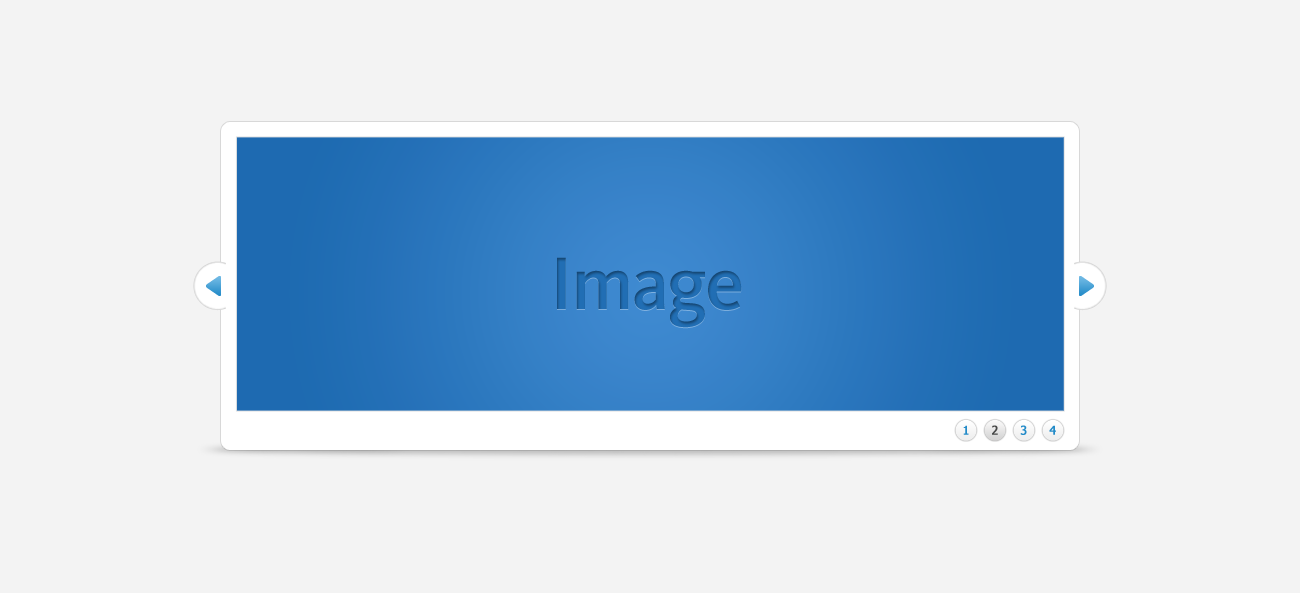
<style>
.page{position:relative;width:1300px;height:593px;background:#f3f3f3}
.page>*{position:absolute;margin:0}
.t1{font:12px "Tahoma";color:#238bc8;font-weight:bold}
.t2{font:12px "Tahoma";color:#454646;font-weight:bold}
</style>
<div class="page">
<p class="t1" style="left:963px;top:425px;width:6px;height:10px">1</p>
<p class="t2" style="left:992px;top:425px;width:6px;height:10px">2</p>
<p class="t1" style="left:1020px;top:425px;width:7px;height:10px">3</p>
<p class="t1" style="left:1049px;top:425px;width:7px;height:10px">4</p>
</div>
